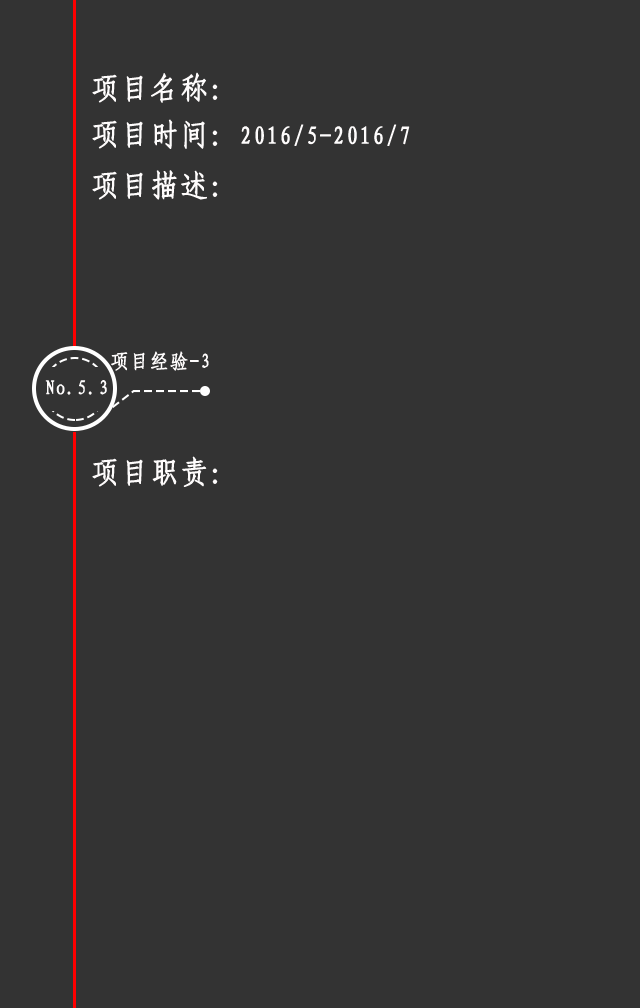
<style>
.page{position:relative;width:640px;height:1008px;background:#333333}
.page>*{position:absolute;margin:0}
.t1{font:30px "-G-s-u-n-0-0-m";letter-spacing:0.05em;color:#fefcfc;font-weight:bold;scale:0.92 1}
.t2{font:25px "-G-s-u-n-0-0-m";letter-spacing:0.05em;color:#fefcfc;font-weight:bold;scale:0.92 1}
.t3{font:20px "-G-s-u-n-0-0-m";letter-spacing:0.05em;color:#fefcfc;font-weight:bold;scale:0.92 1}
</style>
<div class="page">
<p class="t1" style="left:92px;top:72px;width:126px;height:31px">项目名称：</p>
<p class="t2" style="left:92px;top:119px;width:318px;height:30px"><span class="t1">项目时间：</span>2016/5-2016/7</p>
<p class="t1" style="left:92px;top:170px;width:126px;height:30px">项目描述：</p>
<p class="t3" style="left:111px;top:351px;width:98px;height:20px">项目经验-3</p>
<p class="t3" style="left:45px;top:380px;width:62px;height:15px">No.5.3</p>
<p class="t1" style="left:92px;top:456px;width:126px;height:31px">项目职责：</p>
</div>
